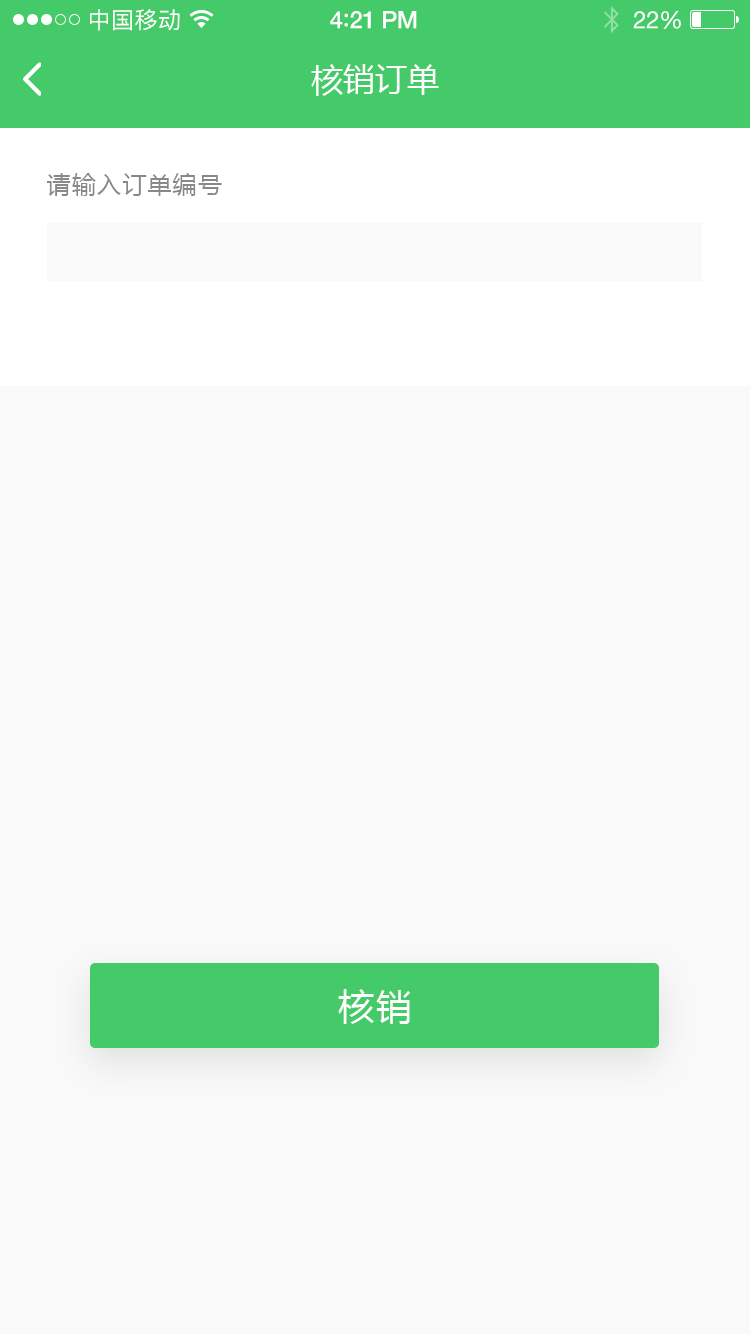
<style>
.page{position:relative;width:750px;height:1334px;background:#f9f9f9}
.page>*{position:absolute;margin:0}
.t1{font:23px "PingFangSC-Regular";letter-spacing:0.02em;color:#ffffff}
.t2{font:24px "HelveticaNeue-Medium";letter-spacing:-0.02em;color:#ffffff}
.t3{font:26px "Avenir-Medium";letter-spacing:-0.02em;color:#ffffff}
.t4{font:24px "HelveticaNeue";letter-spacing:-0.02em;color:#ffffff}
.t5{font:32px "MicrosoftYaHei";color:#ffffff;text-transform:uppercase}
.t6{font:24px "MicrosoftYaHei";letter-spacing:0.05em;color:#888888;text-transform:uppercase}
.t7{font:36px "MicrosoftYaHei";letter-spacing:0.06em;color:#ffffff;text-transform:uppercase}
</style>
<div class="page">
<p class="t1" style="left:90px;top:9px;width:90px;height:22px">中国移动</p>
<p class="t2" style="left:330px;top:11px;width:87px;height:18px">4<span class="t3">:</span>21 PM</p>
<p class="t4" style="left:633px;top:11px;width:48px;height:18px">22%</p>
<p class="t5" style="left:311px;top:64px;width:128px;height:32px">核销订单</p>
<p class="t6" style="left:47px;top:173px;width:175px;height:23px">请输入订单编号</p>
<p class="t7" style="left:338px;top:989px;width:73px;height:35px">核销</p>
</div>
